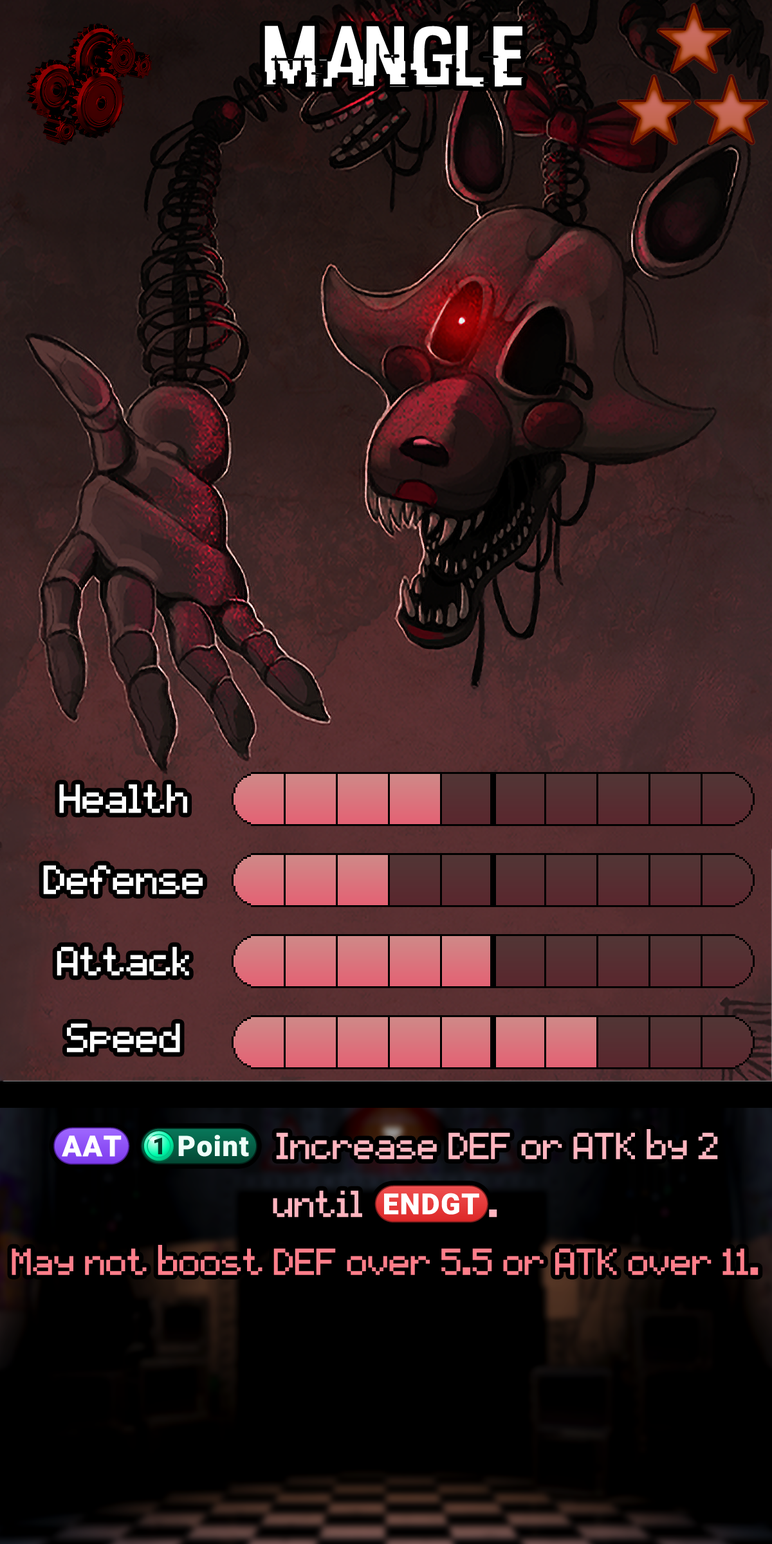
<style>
.page{position:relative;width:772px;height:1544px}
.page>*{position:absolute;margin:0}
.t1{font:88.2px "HACKED";color:#ffffff}
.t2{font:65px "Five-Nights-at-Freddy's";color:#ffffff}
.t3{font:59.8px/57.9px "Five-Nights-at-Freddy's"}
.t4{font:38px/57.9px "stoogedings-Regular";letter-spacing:0.245em}
.t5{font:37.2px/57.9px "stoogedings-Regular";letter-spacing:0.245em}
.t6{font:38px/57.9px "stoogedings-Regular"}
</style>
<div class="page">
<p class="t1" style="left:263px;top:25px;width:261px;height:63px">Mangle</p>
<p class="t2" style="left:59px;top:784px;width:128px;height:29px">Health</p>
<p class="t2" style="left:43px;top:865px;width:160px;height:29px">Defense</p>
<p class="t2" style="left:57px;top:947px;width:132px;height:29px">Attack</p>
<p class="t2" style="left:67px;top:1024px;width:113px;height:29px">Speed</p>
<p class="t3" style="left:12px;top:1127px;width:747px;height:148px;text-align:center"><span class="t4">(AAT)</span><span class="t5">(1 point)</span> Increase DEF or ATK by 2 until <span class="t6">(ENDGT)</span>.<br>May not boost DEF over 5.5 or ATK over 11.</p>
</div>
